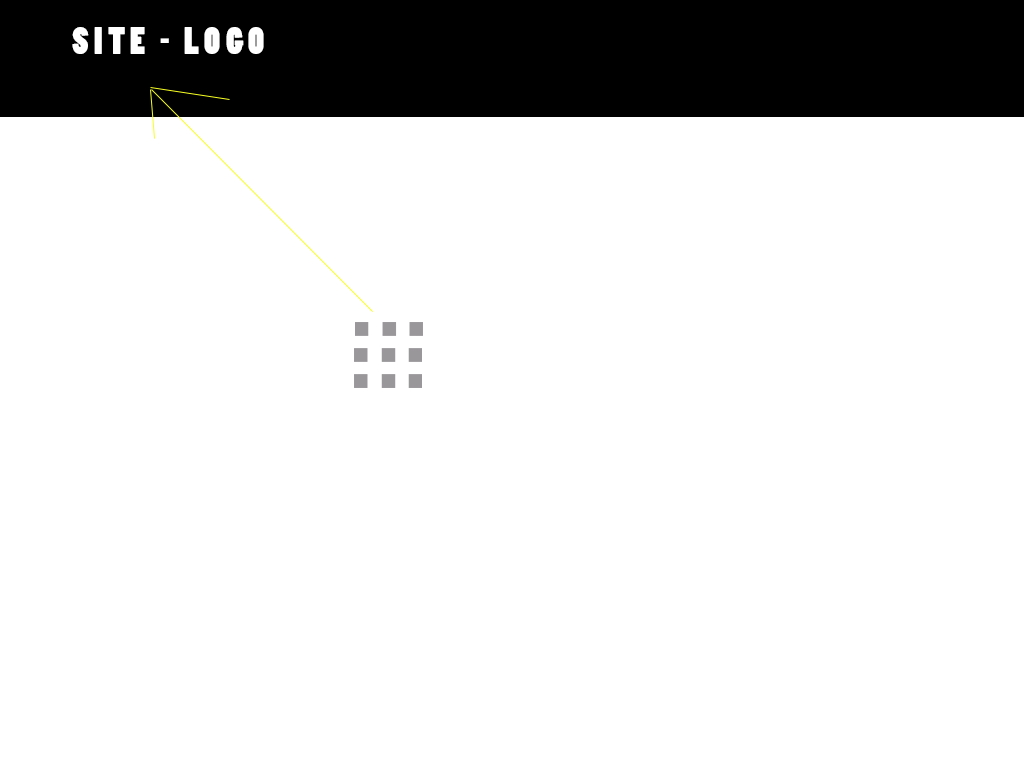
<style>
.page{position:relative;width:1024px;height:768px;background:#ffffff}
.page>*{position:absolute;margin:0}
.t1{font:36px "PoplarStd";letter-spacing:0.15em;color:#ffffff;text-transform:uppercase}
</style>
<div class="page">
<p class="t1" style="left:72px;top:27px;width:192px;height:27px">Site - LOGO</p>
</div>
